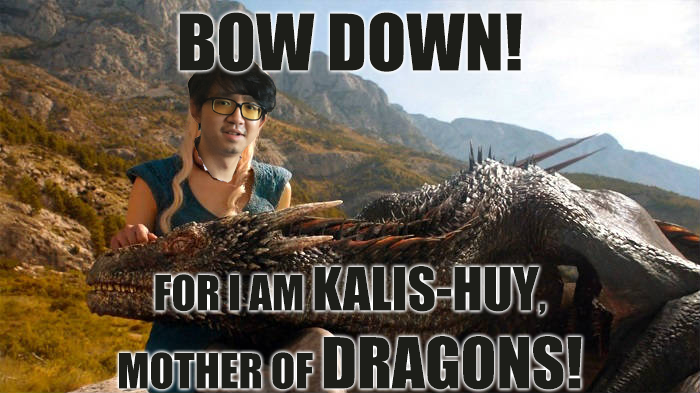
<style>
.page{position:relative;width:700px;height:393px}
.page>*{position:absolute;margin:0}
.t1{font:72px "Impact";color:#1d1e19}
.t2{font:15px "Impact";color:#1d1e19}
.t3{font:65px "Impact";color:#1d1e19}
.t4{font:45px "Impact";color:#1d1e19}
.t5{font:55px "Impact";color:#1d1e19}
</style>
<div class="page">
<p class="t1" style="left:119px;top:12px;width:463px;height:378px;text-align:center">BOW DOWN!<br><span class="t2"><br></span><span class="t3"><br><br></span><span class="t4">FOR I AM </span><span class="t5">KALIS-HUY</span><span class="t4">, </span><span class="t5"><br></span><span class="t4">MOTHER OF </span><span class="t3">DRAGONS!</span></p>
</div>
